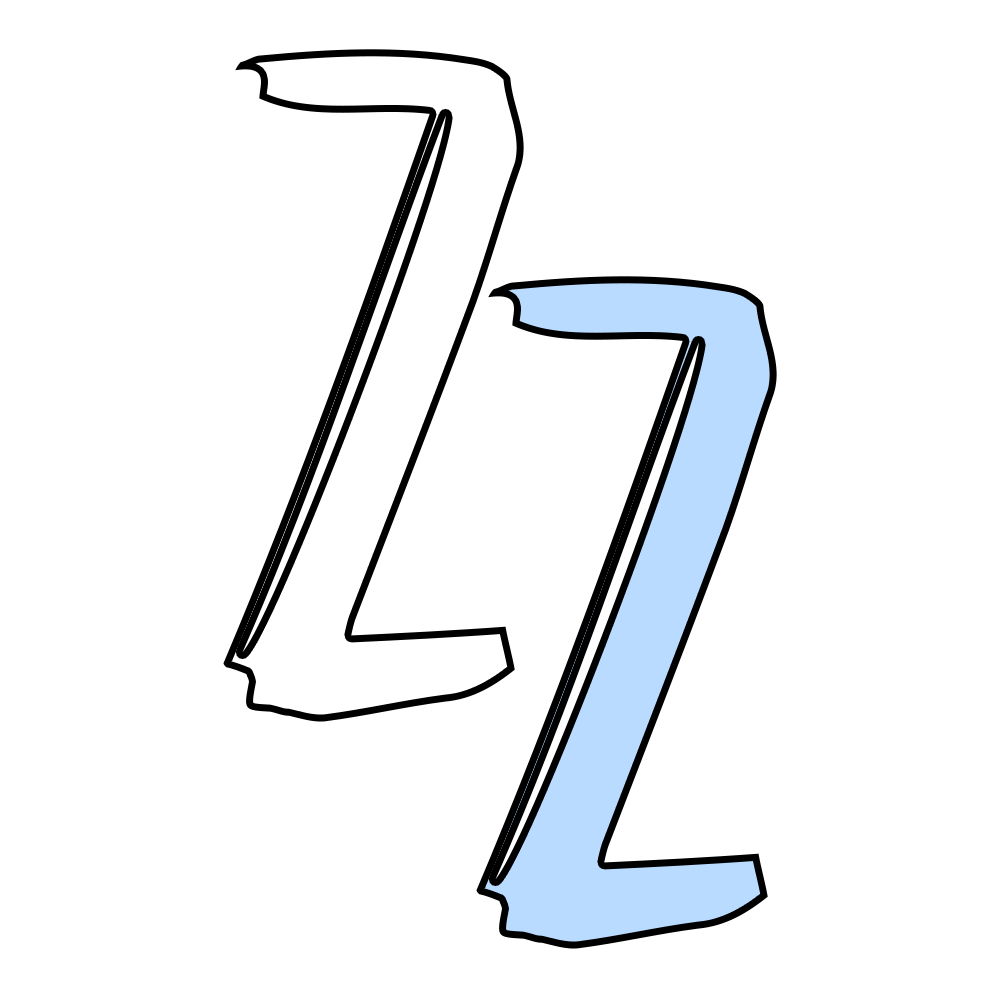
<style>
.page{position:relative;width:1000px;height:1000px;background:#ffffff}
.page>*{position:absolute;margin:0}
.t1{font:1341.7px "Story-of-Alundra";letter-spacing:0.015em;color:#ffffff}
.t2{font:1341.7px "Story-of-Alundra";letter-spacing:0.015em;color:#b8dbff}
</style>
<div class="page">
<p class="t1" style="left:223px;top:49px;width:301px;height:673px">z</p>
<p class="t2" style="left:476px;top:276px;width:301px;height:673px">z</p>
</div>
